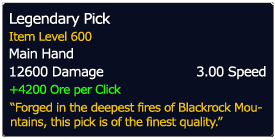
<style>
.page{position:relative;width:275px;height:140px;background:#080d21}
.page>*{position:absolute;margin:0}
.t1{font:14.7px "Verdana";letter-spacing:-0.05em;color:#ffffff}
.t2{font:12px "Verdana";letter-spacing:-0.05em;color:#efc10a}
.t3{font:13.3px "Verdana";letter-spacing:-0.05em;color:#ffffff}
.t4{font:12px "Verdana";letter-spacing:-0.05em;color:#1eff00}
</style>
<div class="page">
<p class="t1" style="left:10px;top:12px;width:101px;height:15px">Legendary Pick</p>
<p class="t2" style="left:9px;top:31px;width:83px;height:10px">Item Level 600</p>
<p class="t3" style="left:9px;top:48px;width:64px;height:11px">Main Hand</p>
<p class="t3" style="left:10px;top:66px;width:94px;height:14px">12600 Damage</p>
<p class="t3" style="left:197px;top:66px;width:69px;height:14px">3.00 Speed</p>
<p class="t4" style="left:10px;top:84px;width:111px;height:13px">+4200 Ore per Click</p>
<p class="t2" style="left:9px;top:102px;width:253px;height:27px">“Forged in the deepest fires of Blackrock Mou-<br>ntains, this pick is of the finest quality.”</p>
</div>
